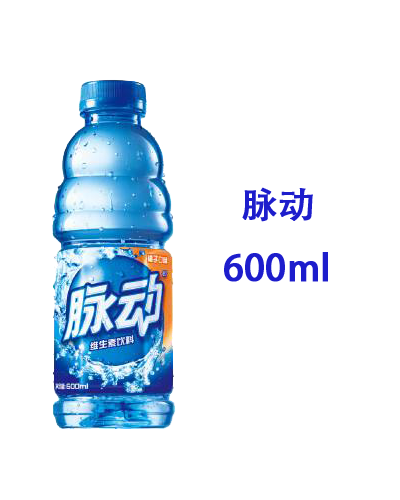
<style>
.page{position:relative;width:400px;height:500px;background:#ffffff}
.page>*{position:absolute;margin:0}
.t1{font:36px "AdobeHeitiStd-Regular";color:#1d1dcc;font-weight:bold}
</style>
<div class="page">
<p class="t1" style="left:224px;top:187px;width:104px;height:95px">脉动<br>600ml</p>
</div>
